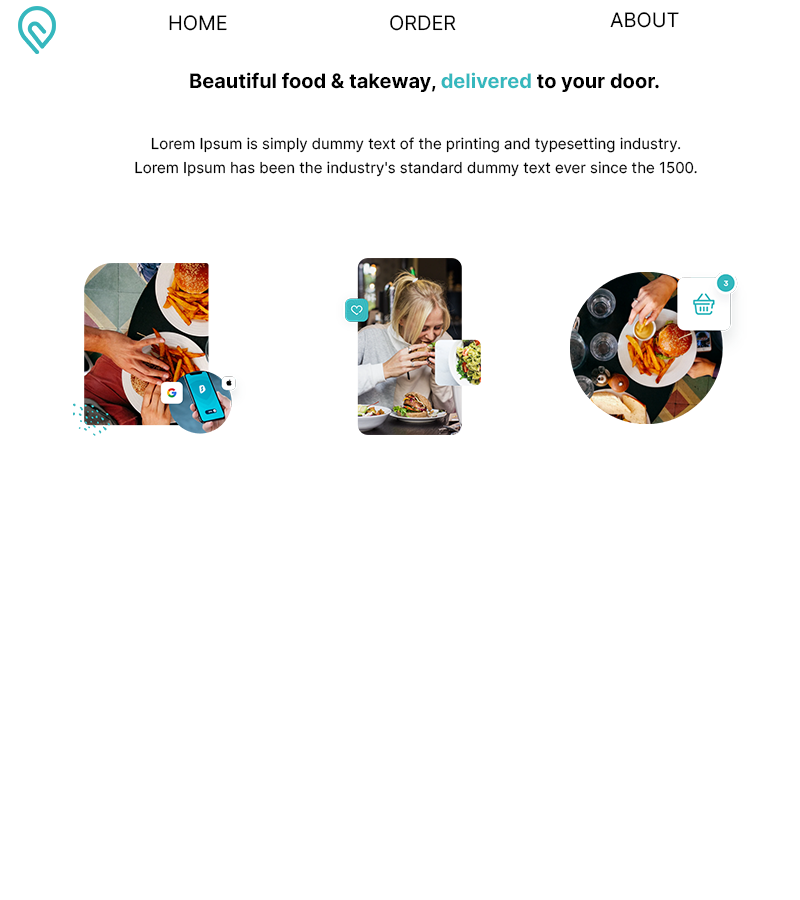
<style>
.page{position:relative;width:800px;height:900px;background:#ffffff}
.page>*{position:absolute;margin:0}
.t1{font:20px "Inter-Regular";color:#000000}
.t2{font:20px "Inter-Bold";color:#000000}
.t3{font:20px "Inter-Bold";color:#35b8be}
.t4{font:15px/24px "Inter-Regular";color:#000000}
</style>
<div class="page">
<p class="t1" style="left:169px;top:15px;width:58px;height:16px">HOME</p>
<p class="t1" style="left:390px;top:15px;width:66px;height:16px">ORDER</p>
<p class="t1" style="left:610px;top:12px;width:69px;height:16px">ABOUT</p>
<p class="t2" style="left:190px;top:72px;width:469px;height:20px">Beautiful food &amp; takeway, <span class="t3">delivered </span>to your door.</p>
<p class="t4" style="left:135px;top:137px;width:562px;height:40px;text-align:center">Lorem Ipsum is simply dummy text of the printing and typesetting industry. Lorem Ipsum has been the industry's standard dummy text ever since the 1500.</p>
</div>
